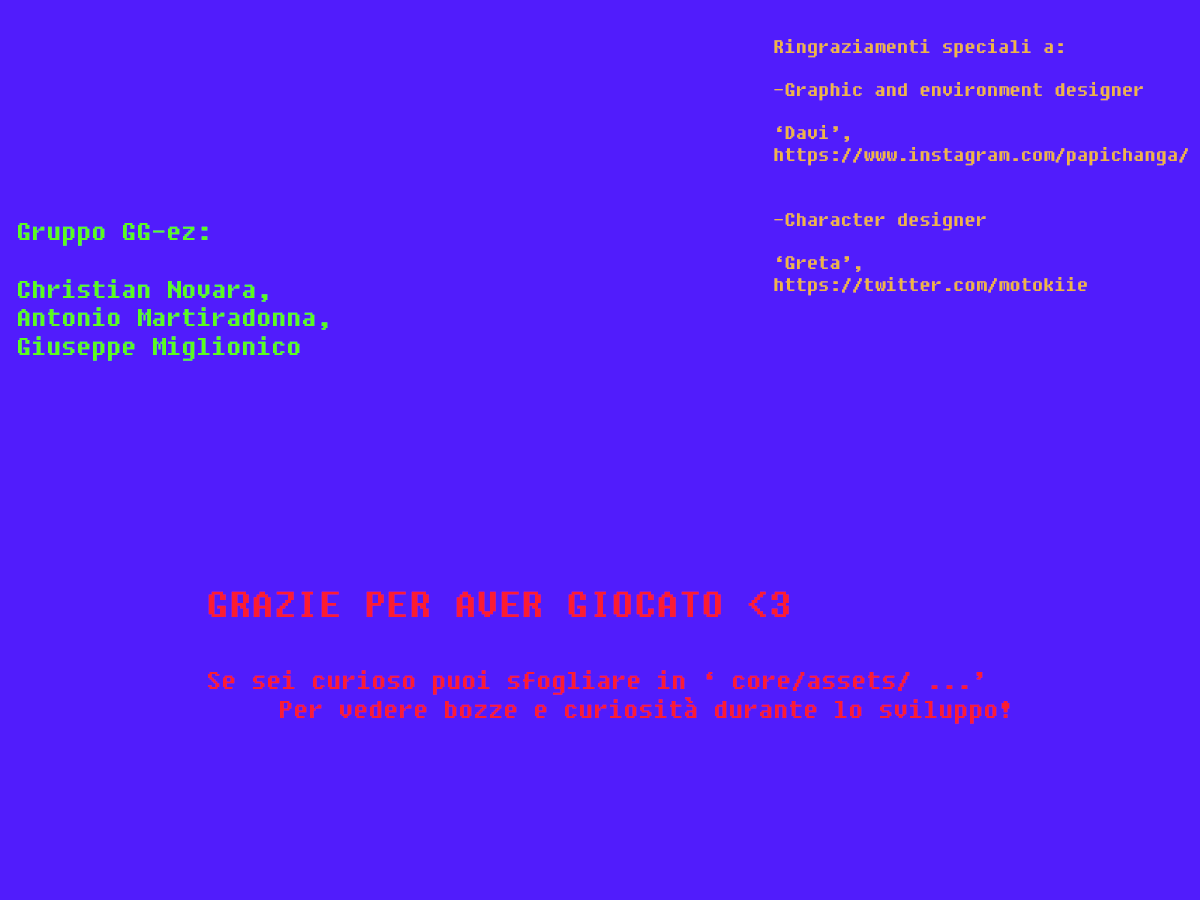
<style>
.page{position:relative;width:1200px;height:900px;background:#511cfc}
.page>*{position:absolute;margin:0}
.t1{font:18px "Fixedsys";color:#f1b540}
.t2{font:24px "Fixedsys";color:#5bfc1c}
.t3{font:24px "Fixedsys";color:#fc1c31}
.t4{font:36px "Fixedsys";color:#fc1c31}
</style>
<div class="page">
<p class="t1" style="left:774px;top:39px;width:414px;height:257px">Ringraziamenti speciali a:<br><br>-Graphic and environment designer<br><br>‘Davi’, <br>https://www.instagram.com/papichanga/<br><br><br>-Character designer<br><br>‘Greta’, <br>https://twitter.com/motokiie</p>
<p class="t2" style="left:18px;top:223px;width:310px;height:138px">Gruppo GG-ez:<br><br>Christian Novara,<br>Antonio Martiradonna,<br>Giuseppe Miglionico</p>
<p class="t3" style="left:208px;top:591px;width:802px;height:133px"><span class="t4">GRAZIE PER AVER GIOCATO &lt;3<br><br></span>Se sei curioso puoi sfogliare in ‘ core/assets/ ...’<br>  Per vedere bozze e curiosità durante lo sviluppo!</p>
</div>
